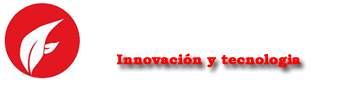
<style>
.page{position:relative;width:350px;height:86px;background:#ffffff}
.page>*{position:absolute;margin:0}
.t1{font:14px "BookmanOldStyle-Bold";color:#ff0000;font-weight:bold}
</style>
<div class="page">
<p class="t1" style="left:117px;top:53px;width:184px;height:15px">Innovación y tecnologia</p>
</div>
